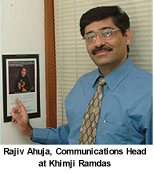
<style>
.page{position:relative;width:154px;height:173px}
.page>*{position:absolute;margin:0}
.t1{font:9px/12px "Arial-BoldMT";letter-spacing:-0.025em;color:#000000}
</style>
<div class="page">
<p class="t1" style="left:4px;top:148px;width:142px;height:21px;text-align:center">Rajiv Ahuja, Communications Head <br>at Khimji Ramdas</p>
</div>
